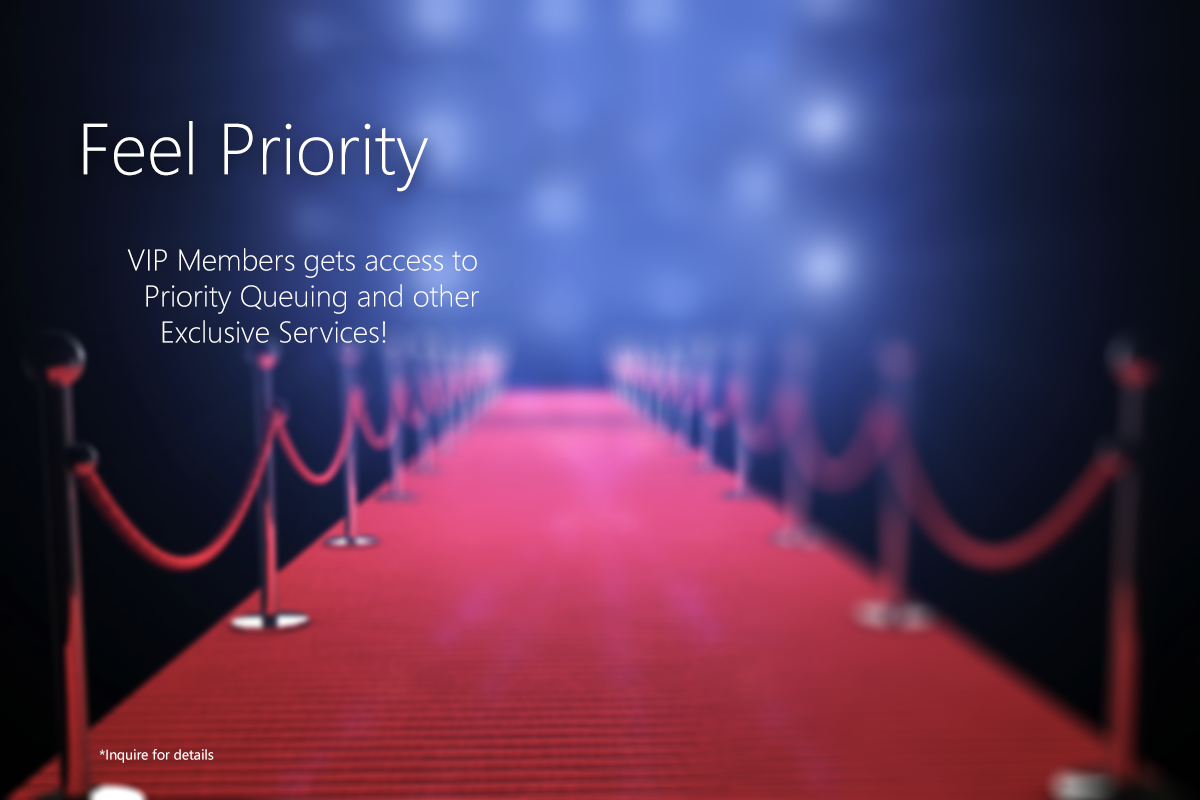
<style>
.page{position:relative;width:1200px;height:800px}
.page>*{position:absolute;margin:0}
.t1{font:72px "SegoeUI-Light";color:#ffffff}
.t2{font:30px "SegoeUI-Light";color:#ffffff}
.t3{font:14px "SegoeUI";color:#ffffff}
</style>
<div class="page">
<p class="t1" style="left:83px;top:121px;width:345px;height:71px">Feel Priority</p>
<p class="t2" style="left:127px;top:248px;width:352px;height:95px">VIP Members gets access to <br>  Priority Queuing and other <br>    Exclusive Services!</p>
<p class="t3" style="left:99px;top:749px;width:115px;height:14px">*Inquire for details</p>
</div>
